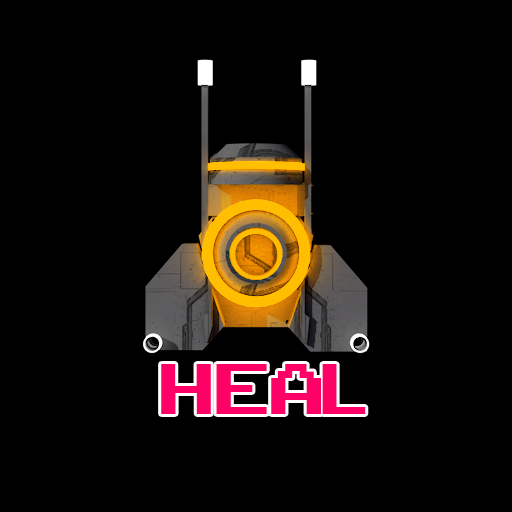
<style>
.page{position:relative;width:512px;height:512px;background:#000000}
.page>*{position:absolute;margin:0}
.t1{font:100px "ArcadeClassic";color:#ff0066}
</style>
<div class="page">
<p class="t1" style="left:161px;top:364px;width:205px;height:50px">Heal</p>
</div>
